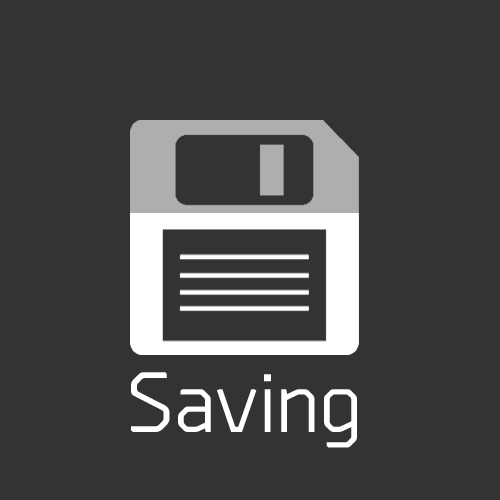
<style>
.page{position:relative;width:500px;height:500px;background:#333333}
.page>*{position:absolute;margin:0}
.t1{font:85.4px "Borda-Light";color:#ffffff}
</style>
<div class="page">
<p class="t1" style="left:131px;top:372px;width:226px;height:76px">Saving</p>
</div>
